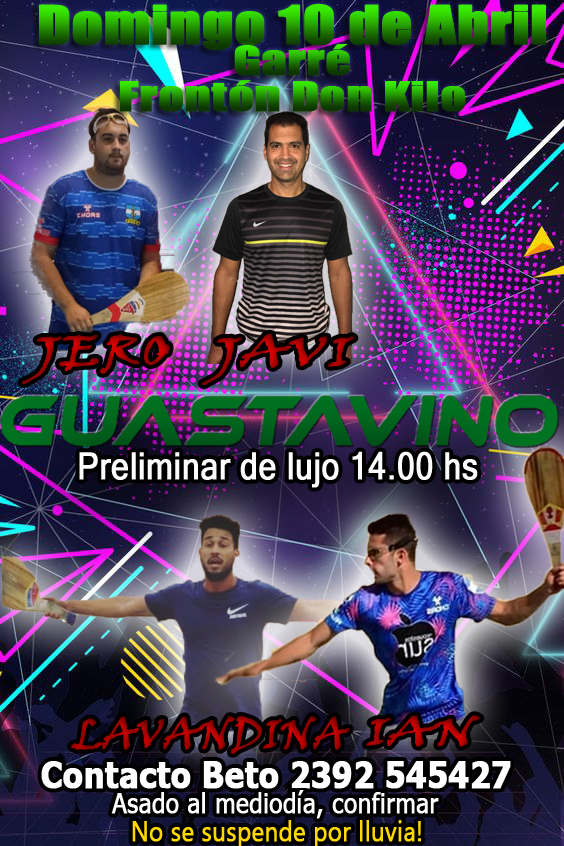
<style>
.page{position:relative;width:564px;height:846px}
.page>*{position:absolute;margin:0}
.t1{font:48.8px "Impact";font-weight:bold;scale:1.22 1}
.t2{font:38.1px "Impact";font-weight:bold;scale:1.29 1}
.t3{font:42.3px "VinerHandITC";font-weight:bold;scale:1.34 1}
.t4{font:37.4px "MicrosoftSansSerif";color:#fdfdfd;font-weight:bold;scale:0.85 1}
.t5{font:41.5px "VinerHandITC";font-weight:bold}
.t6{font:38.7px "VinerHandITC";font-weight:bold;scale:1.39 1}
.t7{font:37.1px "Tahoma-Bold";color:#ffffff;font-weight:bold;scale:0.86 1}
.t8{font:27.8px "Tahoma";color:#ffffff;font-weight:bold;scale:0.86 1}
.t9{font:27.7px "SegoeUIHistoric";color:#ffd800;font-weight:bold;scale:0.85 1}
</style>
<div class="page">
<p class="t1" style="left:39px;top:3px;width:507px;height:47px">Domingo 10 de Abril</p>
<p class="t2" style="left:234px;top:44px;width:116px;height:32px">Garré</p>
<p class="t2" style="left:120px;top:80px;width:345px;height:32px">Frontón Don Kilo</p>
<p class="t3" style="left:21px;top:334px;width:149px;height:50px">JERO</p>
<p class="t3" style="left:201px;top:333px;width:154px;height:52px">JAVI</p>
<p class="t4" style="left:79px;top:451px;width:399px;height:37px">Preliminar de lujo 14.00 hs</p>
<p class="t5" style="left:71px;top:716px;width:279px;height:38px">LAVANDINA</p>
<p class="t6" style="left:366px;top:715px;width:115px;height:32px">IAN</p>
<p class="t7" style="left:41px;top:761px;width:470px;height:28px">Contacto Beto 2392 545427</p>
<p class="t8" style="left:111px;top:790px;width:328px;height:29px">Asado al mediodía, confirmar</p>
<p class="t9" style="left:132px;top:820px;width:290px;height:28px">No se suspende por lluvia!</p>
</div>
